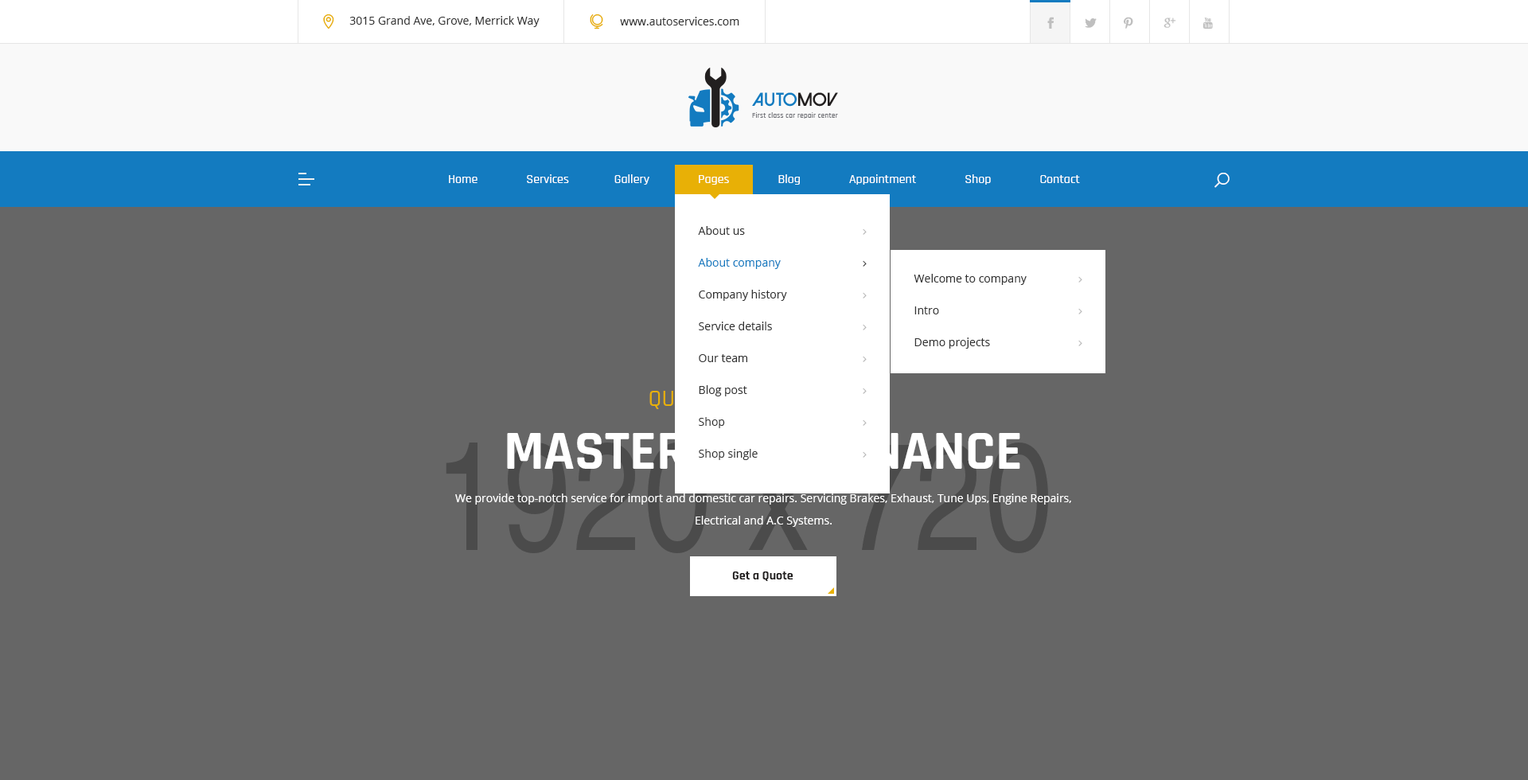
<style>
.page{position:relative;width:1528px;height:780px;background:#666666}
.page>*{position:absolute;margin:0}
.t1{font:11.1px "OpenSans";color:#343434}
.t2{font:12.7px "Rajdhani-Medium";color:#ffffff}
.t3{font:11.1px/31.8px "OpenSans";color:#343434}
.t4{font:11.1px/31.8px "OpenSans";color:#137bc0}
.t5{font:55.7px "Rajdhani-Bold";color:#ffffff;text-transform:uppercase}
.t6{font:11.1px/22.3px "OpenSans";color:#ffffff}
.t7{font:12.7px "Rajdhani-Bold";color:#221f1f}
</style>
<div class="page">
<p class="t1" style="left:349px;top:16px;width:191px;height:11px">3015 Grand Ave, Grove, Merrick Way</p>
<p class="t1" style="left:620px;top:17px;width:120px;height:8px">www.autoservices.com</p>
<p class="t2" style="left:449px;top:174px;width:631px;height:11px">Home               Services              Gallery               Pages               Blog               Appointment               Shop               Contact</p>
<p class="t3" style="left:698px;top:226px;width:89px;height:234px">About us<br><span class="t4">About company<br></span>Company history<br>Service details<br>Our team<br>Blog post<br>Shop<br>Shop single</p>
<p class="t3" style="left:914px;top:274px;width:113px;height:75px">Welcome to company<br>Intro<br>Demo projects</p>
<p class="t5" style="left:507px;top:433px;width:514px;height:36px">Master maintenance</p>
<p class="t6" style="left:455px;top:494px;width:617px;height:33px;text-align:center">We provide top-notch service for import and domestic car repairs. Servicing Brakes, Exhaust, Tune Ups, Engine Repairs, <br>Electrical and A.C Systems.</p>
<p class="t7" style="left:732px;top:572px;width:62px;height:9px">Get a Quote</p>
</div>
